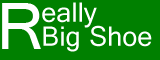
<style>
.page{position:relative;width:160px;height:60px;background:#008000}
.page>*{position:absolute;margin:0}
.t1{font:72px "Latha";letter-spacing:-0.05em;color:#ffffff}
.t2{font:30px/24px "Latha";color:#ffffff}
</style>
<div class="page">
<p class="t1" style="left:2px;top:3px;width:39px;height:46px">R</p>
<p class="t2" style="left:42px;top:2px;width:110px;height:50px">eally<br>Big Shoe</p>
</div>
